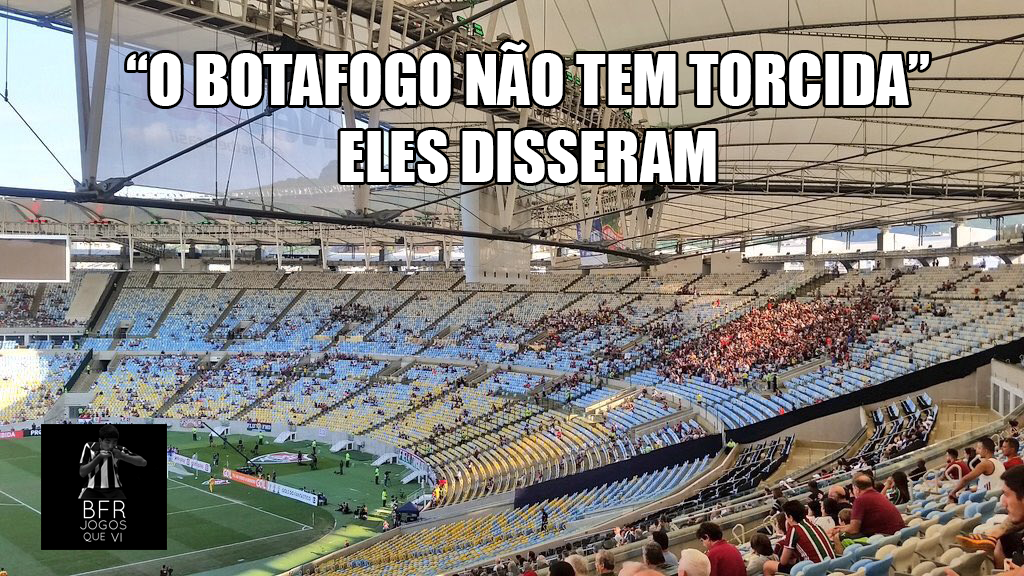
<style>
.page{position:relative;width:1024px;height:576px}
.page>*{position:absolute;margin:0}
.t1{font:63.7px "Impact";color:#ffffff}
</style>
<div class="page">
<p class="t1" style="left:127px;top:42px;width:802px;height:141px;text-align:center">“O BOTAFOGO NÃO TEM TORCIDA”<br>ELES DISSERAM</p>
</div>
